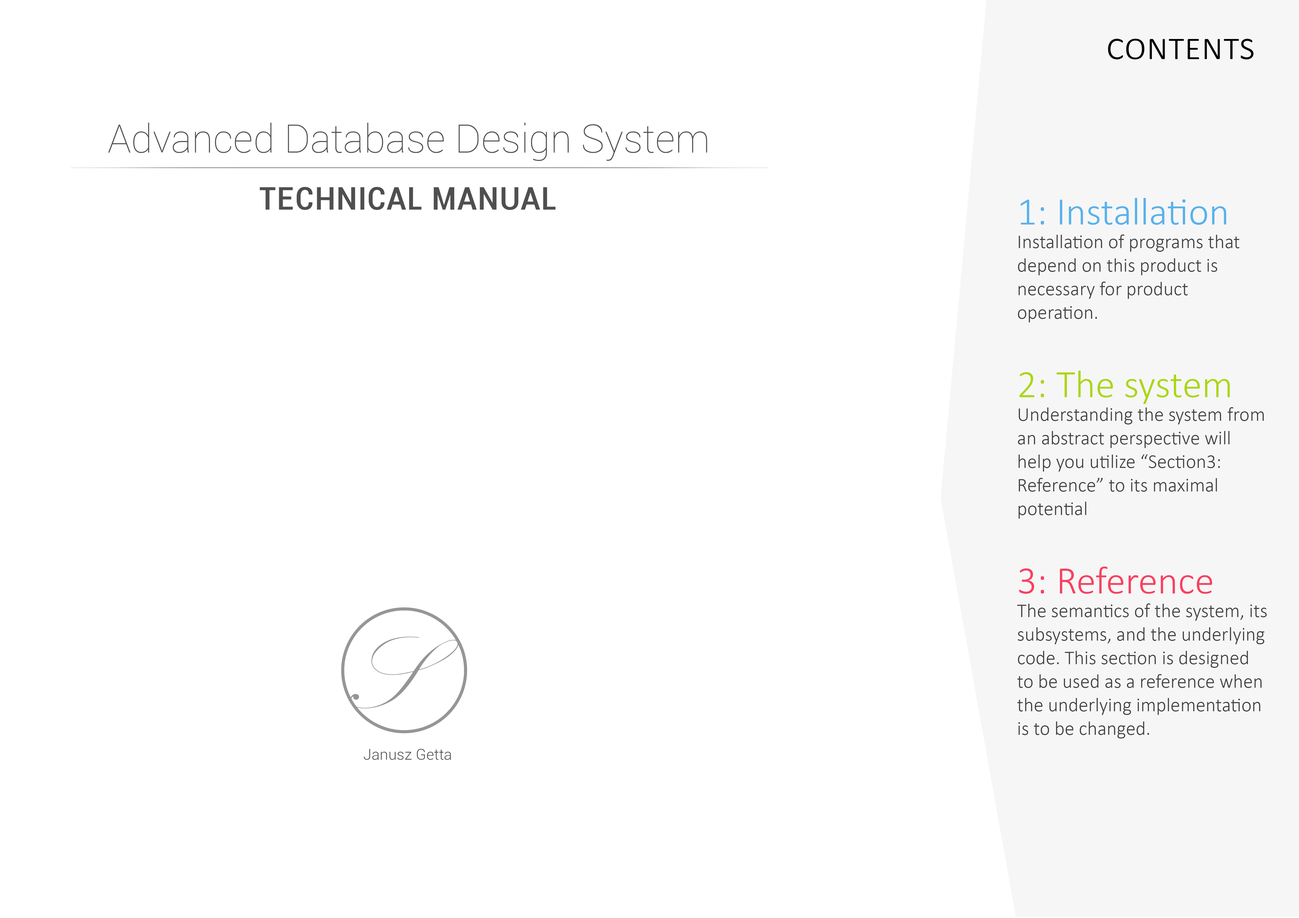
<style>
.page{position:relative;width:1299px;height:918px;background:#ffffff}
.page>*{position:absolute;margin:0}
.t1{font:39.3px "Calibri-Light";color:#000000;font-variant:small-caps}
.t2{font:39.3px "Roboto-Thin";color:#4f4f4f}
.t3{font:39.3px "Roboto-Condensed";color:#4f4f4f;font-variant:small-caps}
.t4{font:19.6px "Calibri-Light";color:#404040}
.t5{font:39.3px "Calibri-Light";color:#58b2eb}
.t6{font:39.3px "Calibri-Light";color:#abd616}
.t7{font:39.3px "Calibri-Light";color:#f8415f}
.t8{font:15.3px "Roboto-Light";color:#4f4f4f}
</style>
<div class="page">
<p class="t1" style="left:1108px;top:39px;width:145px;height:20px">contents</p>
<p class="t2" style="left:108px;top:123px;width:599px;height:38px">Advanced Database Design System</p>
<p class="t3" style="left:260px;top:187px;width:295px;height:23px">technical manual</p>
<p class="t4" style="left:1017px;top:198px;width:249px;height:541px"><span class="t5">1: Installation<br></span>Installation of programs that depend on this product is necessary for product operation.<br><br><span class="t6">2: The system<br></span>Understanding the system from an abstract perspective will help you utilize “Section3: Reference” to its maximal potential<br><br><span class="t7">3: Reference<br></span>The semantics of the system, its subsystems, and the underlying code. This section is designed to be used as a reference when the underlying implementation is to be changed.</p>
<p class="t8" style="left:364px;top:749px;width:87px;height:11px">Janusz Getta</p>
</div>
